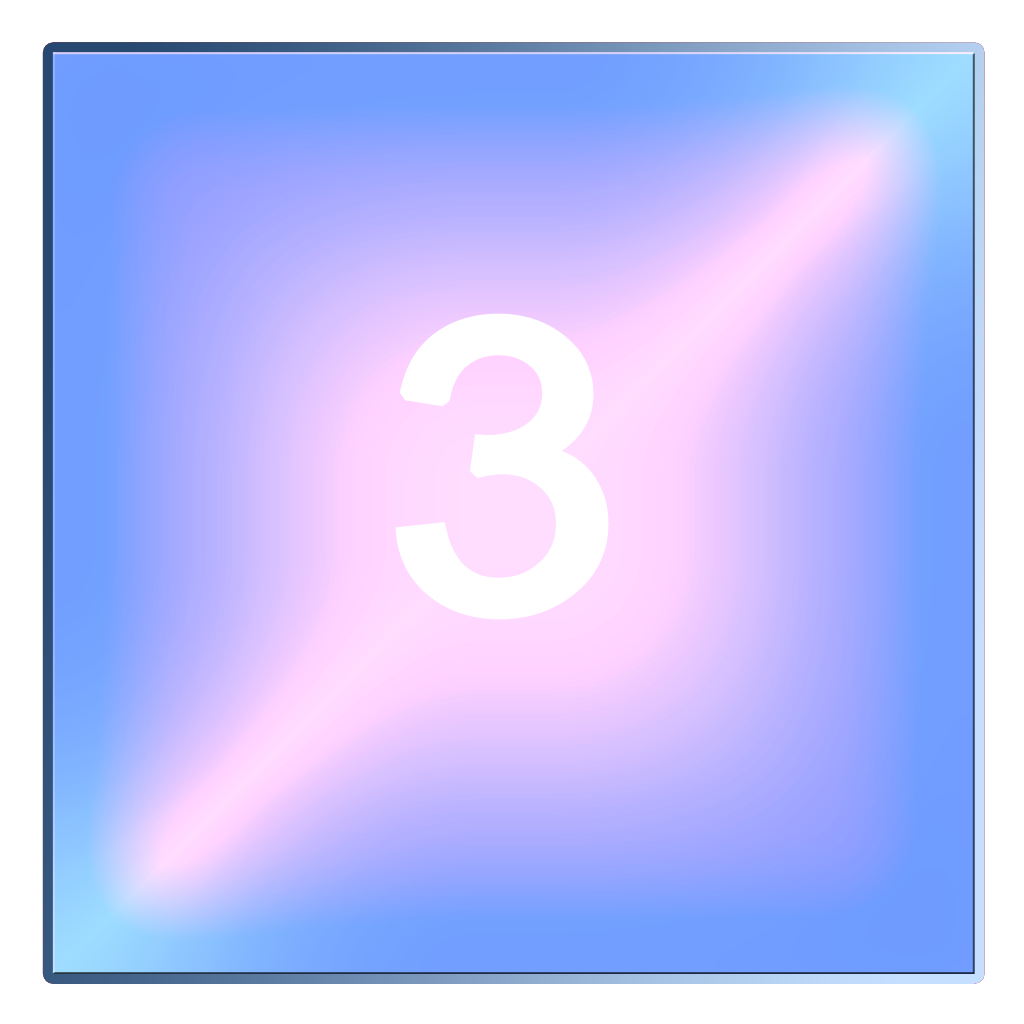
<style>
.page{position:relative;width:1024px;height:1024px}
.page>*{position:absolute;margin:0}
.t1{font:400px "ArialNarrow";color:#ffffff;font-weight:bold;scale:1.3 1}
</style>
<div class="page">
<p class="t1" style="left:395px;top:313px;width:214px;height:307px">3</p>
</div>
